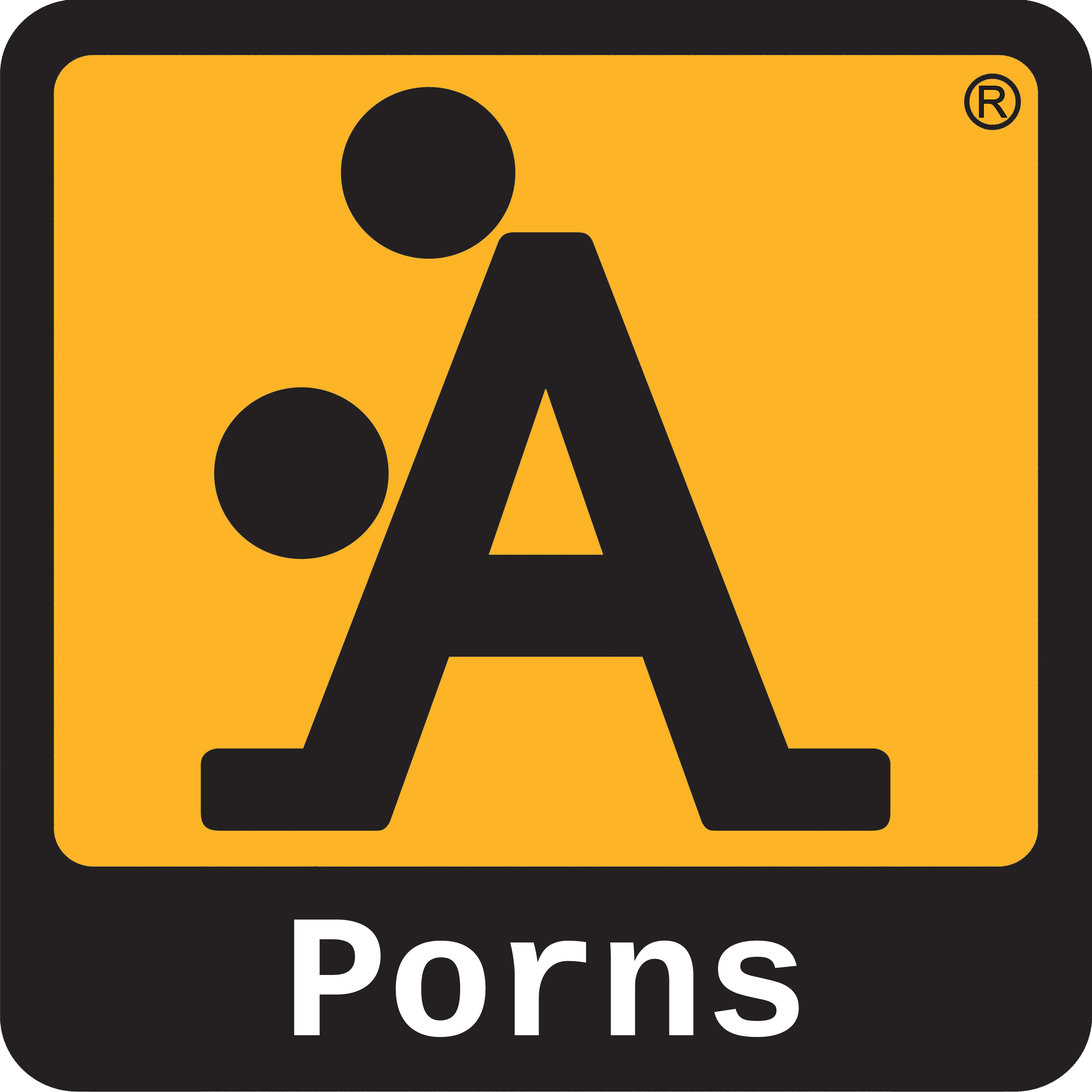
<style>
.page{position:relative;width:1092px;height:1092px;background:#fdb427}
.page>*{position:absolute;margin:0}
.t1{font:175.6px "Cousine-Bold";color:#ffffff}
</style>
<div class="page">
<p class="t1" style="left:294px;top:919px;width:505px;height:118px">Porns</p>
</div>
